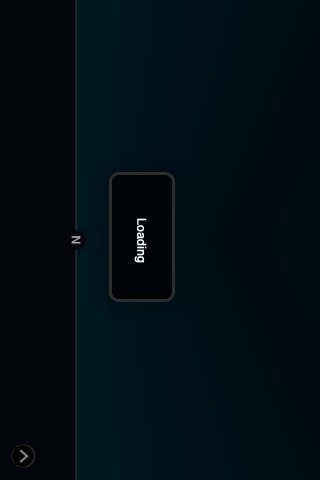
<style>
.page{position:relative;width:320px;height:480px;background:#00060a}
.page>*{position:absolute;margin:0}
.t1{font:12px "Helvetica";color:#ffffff;font-weight:bold}
</style>
<div class="page">
<p class="t1" style="left:134px;top:218px;width:13px;height:45px;rotate:90deg">Loading</p>
</div>
